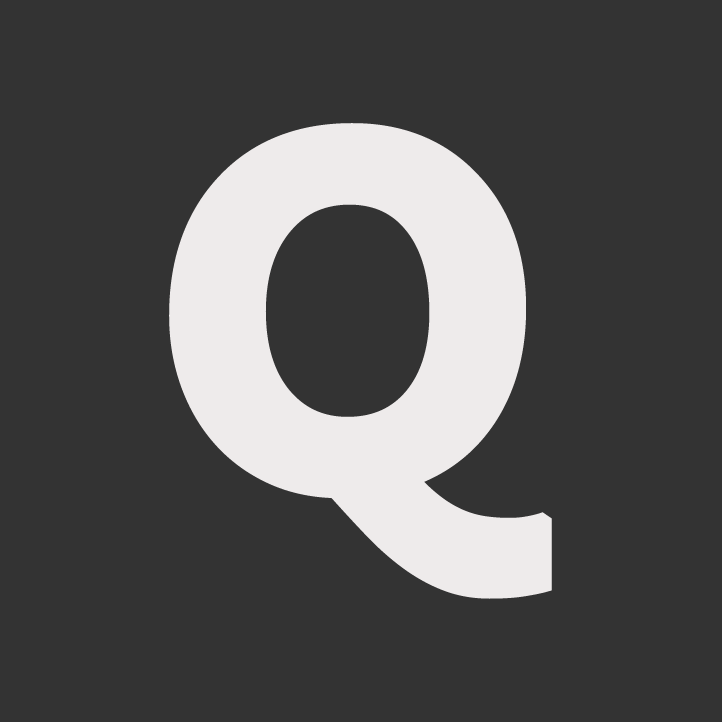
<style>
.page{position:relative;width:722px;height:722px;background:#333333}
.page>*{position:absolute;margin:0}
.t1{font:500px "Ebrima-Bold";color:#eeebeb;font-weight:bold}
</style>
<div class="page">
<p class="t1" style="left:169px;top:123px;width:383px;height:476px">Q</p>
</div>
